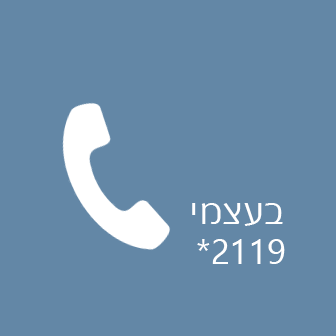
<style>
.page{position:relative;width:336px;height:336px;background:#6387a6}
.page>*{position:absolute;margin:0}
.t1{font:35px "SegoeUI";color:#ffffff}
</style>
<div class="page">
<p class="t1" style="left:192px;top:203px;width:91px;height:23px">בעצמי</p>
<p class="t1" style="left:197px;top:239px;width:88px;height:25px">*2119</p>
</div>
